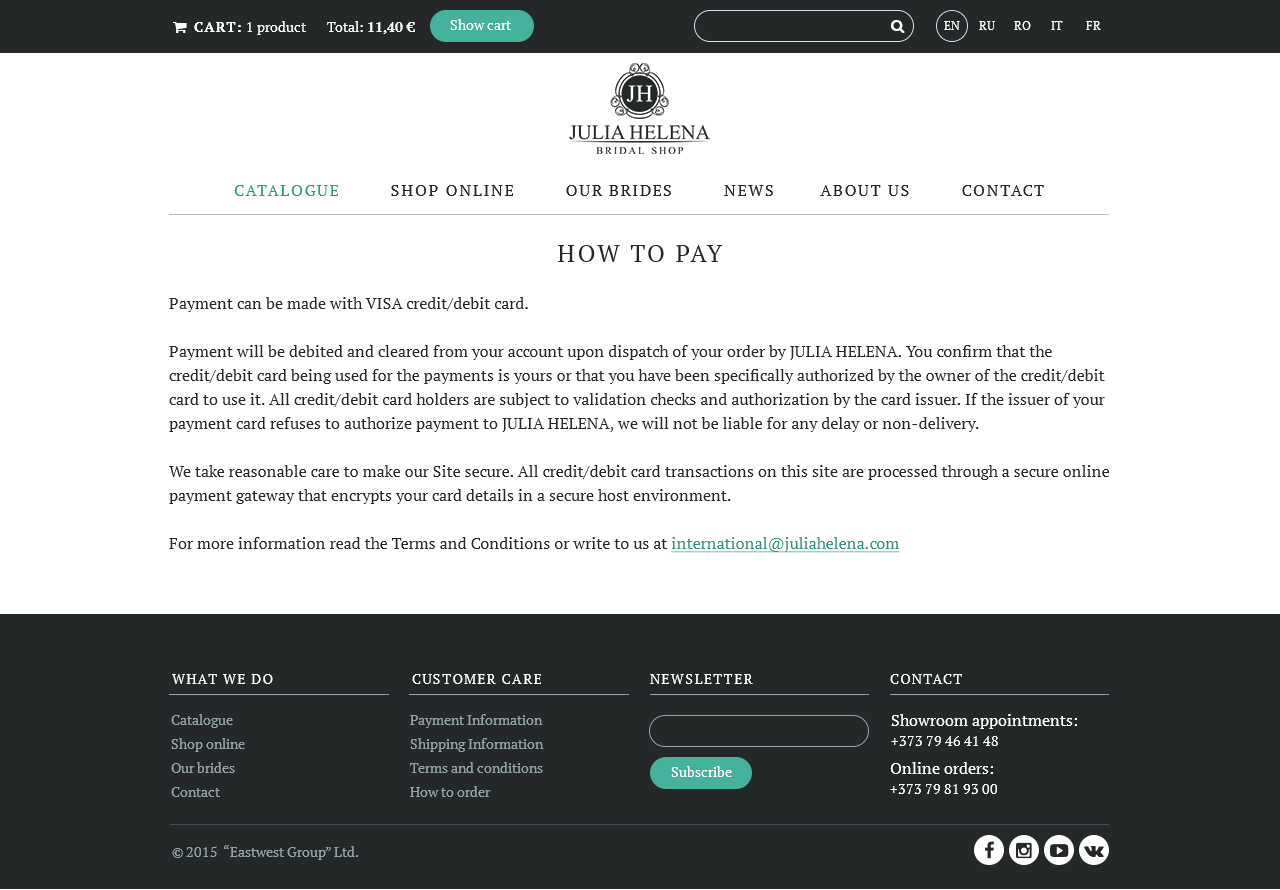
<style>
.page{position:relative;width:1280px;height:890px;background:#ffffff}
.page>*{position:absolute;margin:0}
.t1{font:24px "PTSerif-Regular";letter-spacing:0.1em;color:#242829;text-transform:uppercase}
.t2{font:16px/24px "PTSerif-Regular";color:#242829}
.t3{font:16px/24px "PTSerif-Regular";color:#2d9782;text-decoration:underline}
</style>
<div class="page">
<p class="t1" style="left:558px;top:245px;width:165px;height:17px">How to Pay</p>
<p class="t2" style="left:169px;top:297px;width:940px;height:256px">Payment can be made with VISA credit/debit card.<br>Payment will be debited and cleared from your account upon dispatch of your order by JULIA HELENA. You confirm that the credit/debit card being used for the payments is yours or that you have been specifically authorized by the owner of the credit/debit card to use it. All credit/debit card holders are subject to validation checks and authorization by the card issuer. If the issuer of your payment card refuses to authorize payment to JULIA HELENA, we will not be liable for any delay or non-delivery.<br>We take reasonable care to make our Site secure. All credit/debit card transactions on this site are processed through a secure online payment gateway that encrypts your card details in a secure host environment. <br>For more information read the Terms and Conditions or write to us at <span class="t3">international@juliahelena.com</span></p>
</div>
